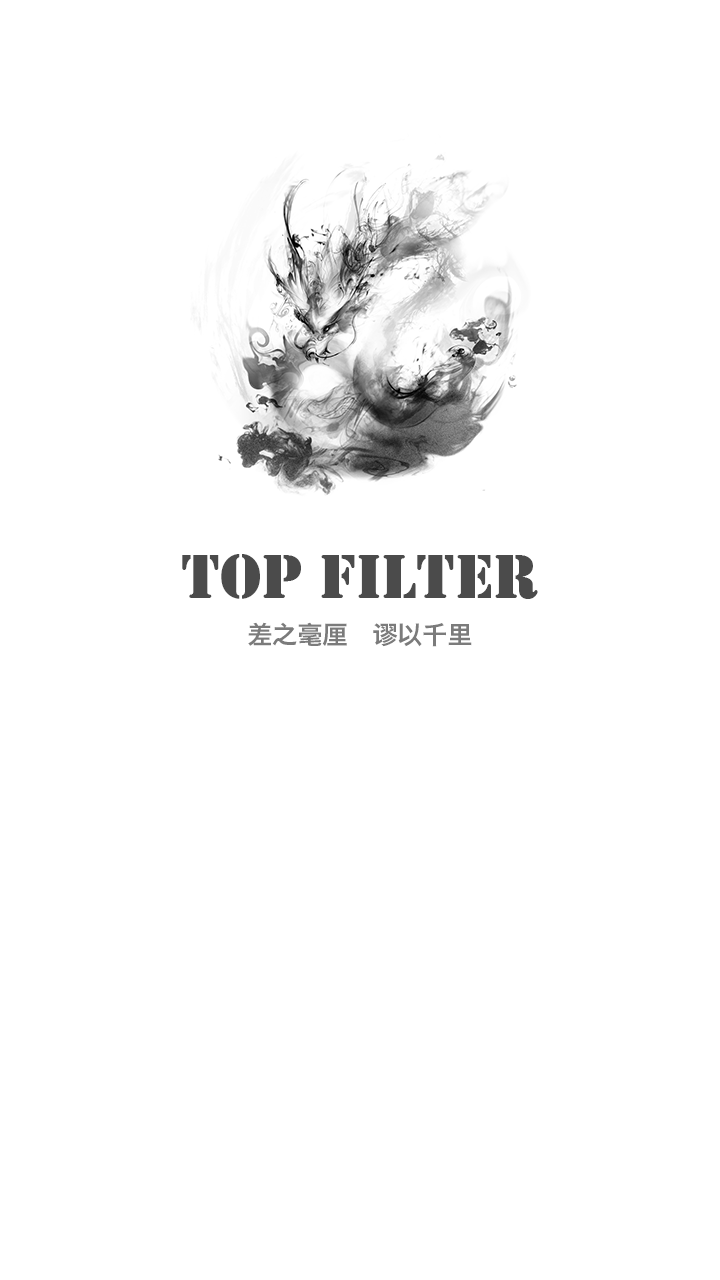
<style>
.page{position:relative;width:720px;height:1280px;background:#ffffff}
.page>*{position:absolute;margin:0}
.t1{font:65px "Stencil";color:#4b4b4b}
.t2{font:25px "HiraginoSansGB-W6";color:#7b7b7b}
</style>
<div class="page">
<p class="t1" style="left:182px;top:554px;width:356px;height:45px">Top Filter</p>
<p class="t2" style="left:248px;top:622px;width:224px;height:25px">差之毫厘   谬以千里</p>
</div>
